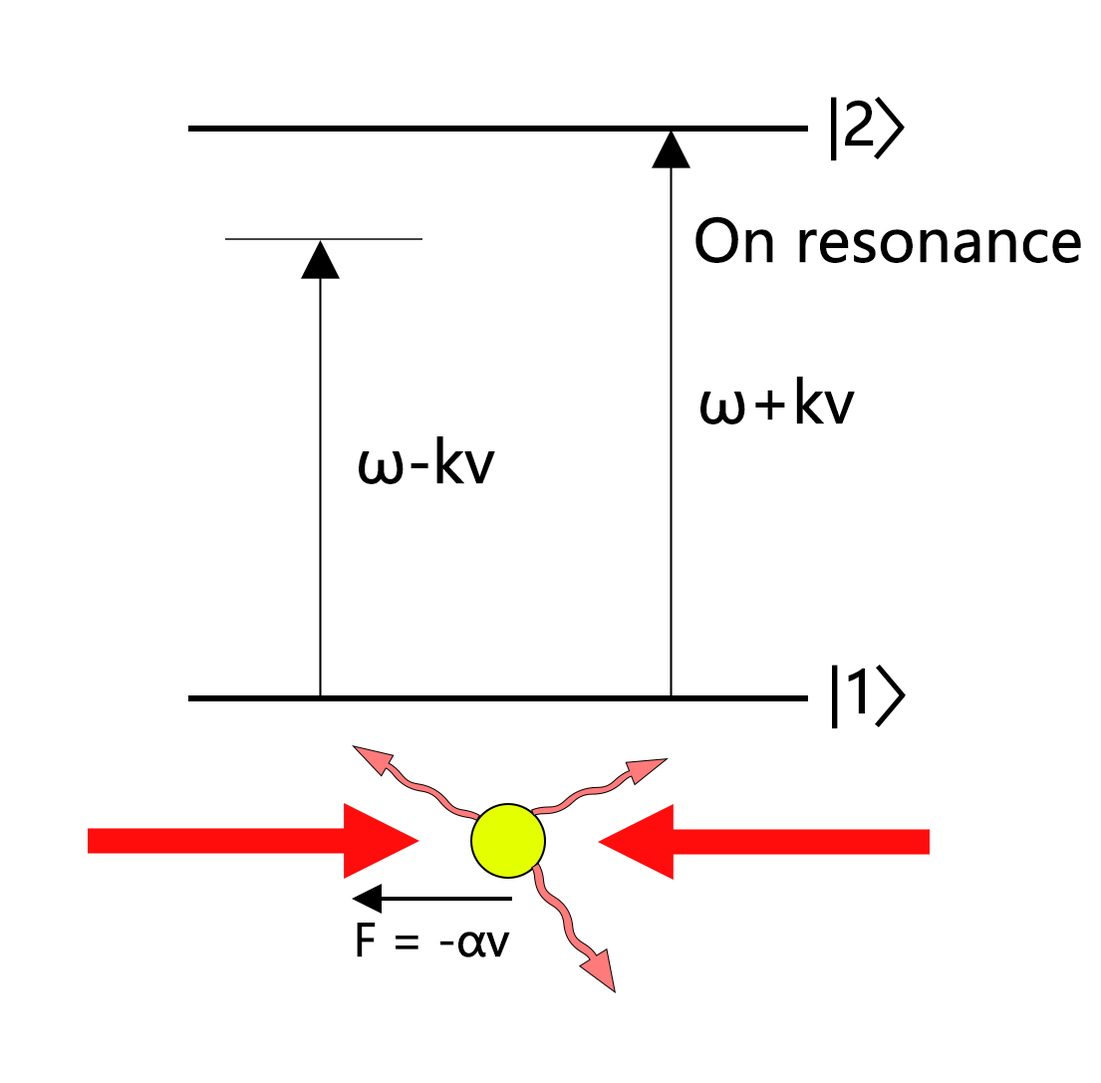
<style>
.page{position:relative;width:1101px;height:1083px;background:#ffffff}
.page>*{position:absolute;margin:0}
.t1{font:58.1px "MicrosoftYaHeiUI";letter-spacing:-0.02em;color:#000000;font-weight:bold}
.t2{font:44.3px "MicrosoftYaHeiUI";letter-spacing:-0.02em;color:#000000;font-weight:bold}
</style>
<div class="page">
<p class="t1" style="left:831px;top:97px;width:43px;height:64px">|2</p>
<p class="t1" style="left:695px;top:216px;width:386px;height:47px">On resonance</p>
<p class="t1" style="left:700px;top:377px;width:155px;height:47px">ω+kv</p>
<p class="t1" style="left:359px;top:436px;width:136px;height:48px">ω-kv</p>
<p class="t1" style="left:832px;top:665px;width:33px;height:64px">|1</p>
<p class="t2" style="left:357px;top:923px;width:153px;height:35px">F = -αv</p>
</div>
